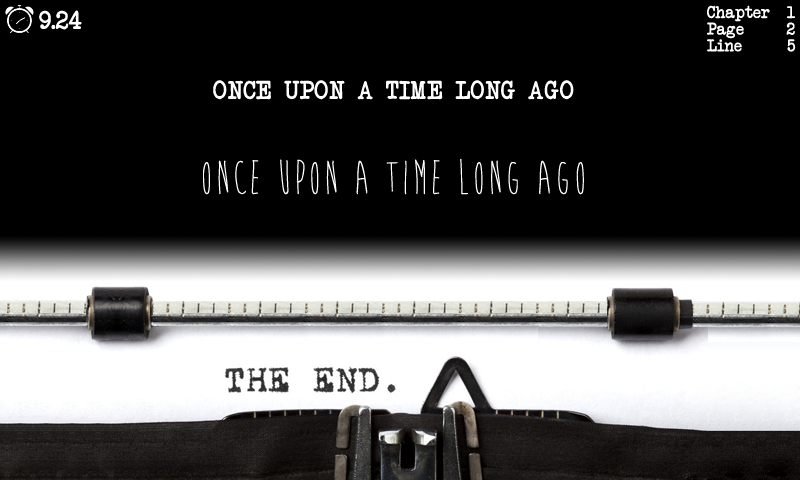
<style>
.page{position:relative;width:800px;height:480px;background:#000000}
.page>*{position:absolute;margin:0}
.t1{font:16.7px/16.7px "AnotherTypewriter";letter-spacing:0.01em;color:#ffffff}
.t2{font:16.7px/16.7px "AnotherTypewriter";letter-spacing:0.1em;color:#ffffff}
.t3{font:25px "AnotherTypewriter";letter-spacing:0.01em;color:#ffffff}
.t4{font:50px "BrainFlower";letter-spacing:0.01em;color:#ffffff}
</style>
<div class="page">
<p class="t1" style="left:707px;top:5px;width:89px;height:47px">Chapter  1<br>Page     2<br>Line   <span class="t2">  5</span></p>
<p class="t3" style="left:39px;top:10px;width:43px;height:20px">9.24</p>
<p class="t3" style="left:213px;top:80px;width:361px;height:20px">ONCE UPON A TIME LONG AGO</p>
<p class="t4" style="left:203px;top:158px;width:381px;height:37px">once upon a time long ago</p>
</div>
